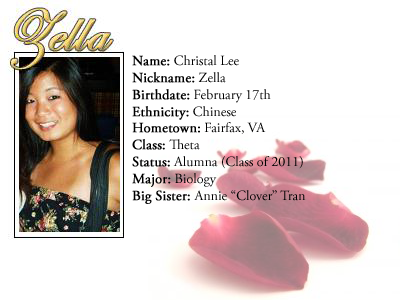
<style>
.page{position:relative;width:400px;height:300px;background:#ffffff}
.page>*{position:absolute;margin:0}
.t1{font:14px "AGaramondPro-Regular";color:#000000}
.t2{font:14px "AGaramondPro-Regular";color:#000000;font-weight:bold}
</style>
<div class="page">
<p class="t1" style="left:132px;top:55px;width:174px;height:149px"><span class="t2">Name:</span> Christal Lee<br><span class="t2">Nickname:</span> Zella<br><span class="t2">Birthdate:</span> February 17th<br><span class="t2">Ethnicity:</span> Chinese<br><span class="t2">Hometown:</span> Fairfax, VA<br><span class="t2">Class:</span> Theta<br><span class="t2">Status:</span> Alumna (Class of 2011)<br><span class="t2">Major:</span> Biology<br><span class="t2">Big Sister: </span>Annie “Clover” Tran</p>
</div>
